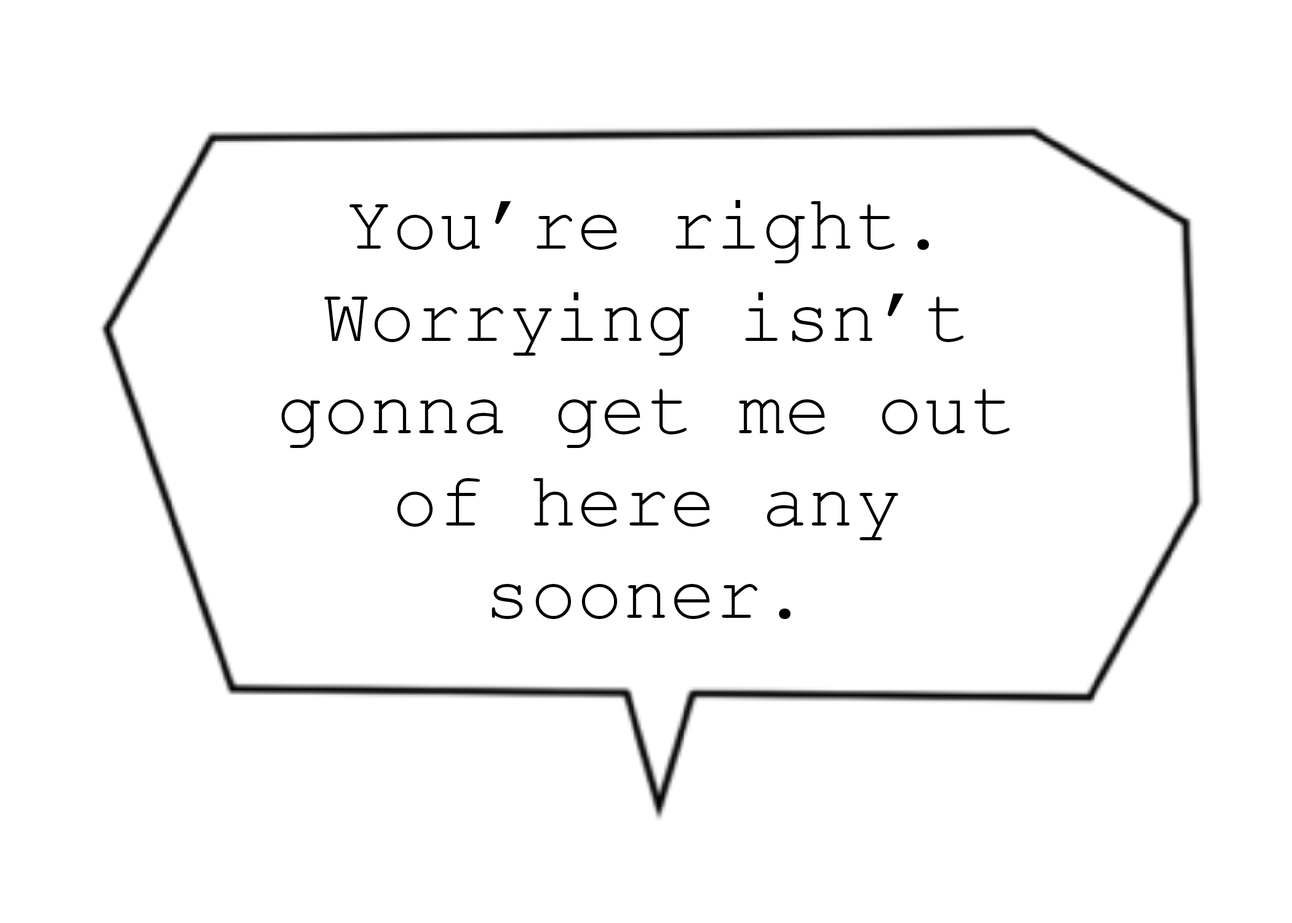
<style>
.page{position:relative;width:1292px;height:923px;background:#ffffff}
.page>*{position:absolute;margin:0}
.t1{font:76.9px "CourierNewPSMT";color:#000000}
</style>
<div class="page">
<p class="t1" style="left:281px;top:200px;width:729px;height:419px;text-align:center">You’re right. Worrying isn’t gonna get me out of here any sooner.</p>
</div>
